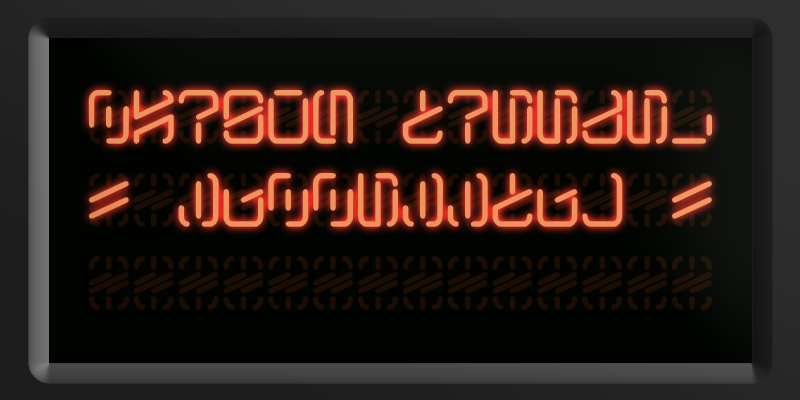
<style>
.page{position:relative;width:800px;height:400px;background:#000300}
.page>*{position:absolute;margin:0}
.t1{font:69px "KyberCrystalDisplay-Aurebesh"}
.t2{font:69px "KyberCrystalDisplay-Aurebesh";color:#ef945e}
</style>
<div class="page">
<p class="t1" style="left:87px;top:89px;width:627px;height:222px">**************<br>**************<br>**************</p>
<p class="t2" style="left:87px;top:88px;width:627px;height:139px">carbon freeze:<br>! successful !</p>
</div>
